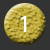
<style>
.page{position:relative;width:50px;height:50px;background:#333333}
.page>*{position:absolute;margin:0}
.t1{font:24px "MyriadPro-Regular";color:#ffffff}
</style>
<div class="page">
<p class="t1" style="left:21px;top:16px;width:6px;height:16px">1</p>
</div>
